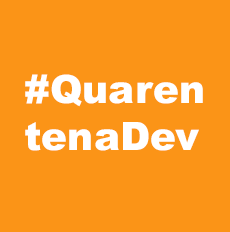
<style>
.page{position:relative;width:230px;height:232px;background:#fb9417}
.page>*{position:absolute;margin:0}
.t1{font:39.2px "Arial-Black";color:#ffffff}
</style>
<div class="page">
<p class="t1" style="left:25px;top:74px;width:178px;height:77px">#Quaren<br>tenaDev</p>
</div>
